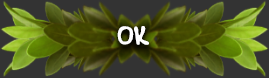
<style>
.page{position:relative;width:269px;height:78px;background:#333333}
.page>*{position:absolute;margin:0}
.t1{font:27.9px "Foma_flibustier";color:#ffffff}
</style>
<div class="page">
<p class="t1" style="left:117px;top:26px;width:32px;height:19px">OK</p>
</div>
